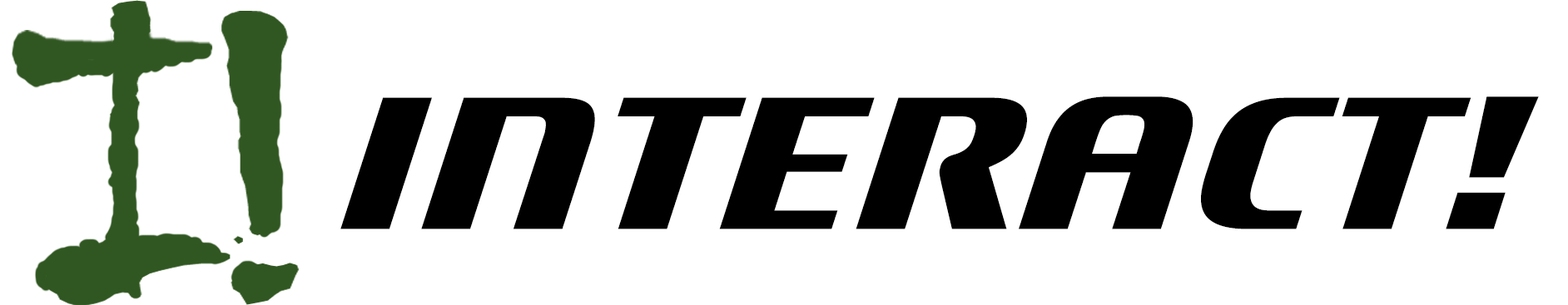
<style>
.page{position:relative;width:1568px;height:305px;background:#ffffff}
.page>*{position:absolute;margin:0}
.t1{font:297.1px "Motorwerk";color:#000000}
</style>
<div class="page">
<p class="t1" style="left:340px;top:97px;width:1199px;height:133px">Interact!</p>
</div>
